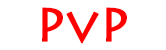
<style>
.page{position:relative;width:166px;height:50px;background:#ffffff}
.page>*{position:absolute;margin:0}
.t1{font:48px "LithosPro-Regular";color:#ff0000;font-weight:bold}
</style>
<div class="page">
<p class="t1" style="left:42px;top:7px;width:85px;height:37px">PvP</p>
</div>
